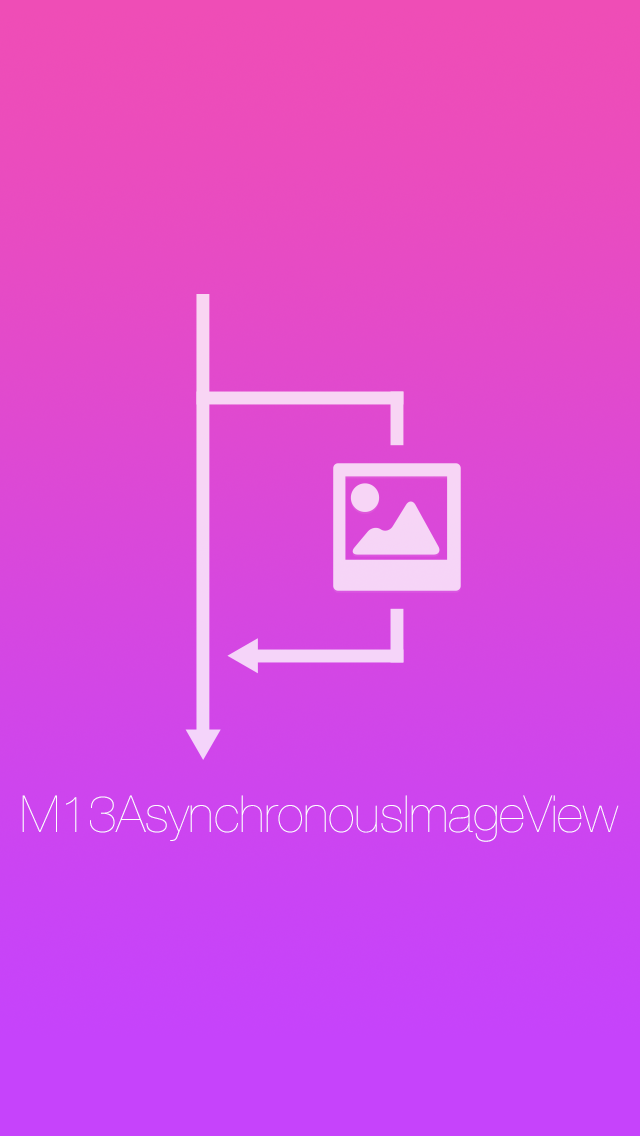
<style>
.page{position:relative;width:640px;height:1136px}
.page>*{position:absolute;margin:0}
.t1{font:51.2px "HelveticaNeue-UltraLight";letter-spacing:-0.007em;color:#ffffff}
</style>
<div class="page">
<p class="t1" style="left:22px;top:795px;width:597px;height:47px">M13AsynchronousImageView</p>
</div>
